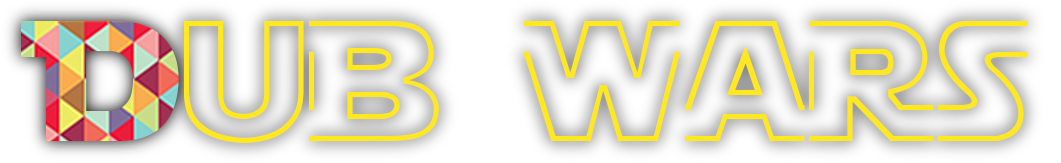
<style>
.page{position:relative;width:1061px;height:163px}
.page>*{position:absolute;margin:0}
.t1{font:170.2px "StarJediHollow"}
.t2{font:170.2px "StarJedi"}
</style>
<div class="page">
<p class="t1" style="left:21px;top:21px;width:1007px;height:122px"><span class="t2">D</span>uB WARS</p>
</div>
